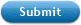
<style>
.page{position:relative;width:81px;height:25px}
.page>*{position:absolute;margin:0}
.t1{font:12px "TrebuchetMS-Bold";letter-spacing:0.05em;color:#ffffff}
</style>
<div class="page">
<p class="t1" style="left:19px;top:7px;width:42px;height:9px">Submit</p>
</div>
